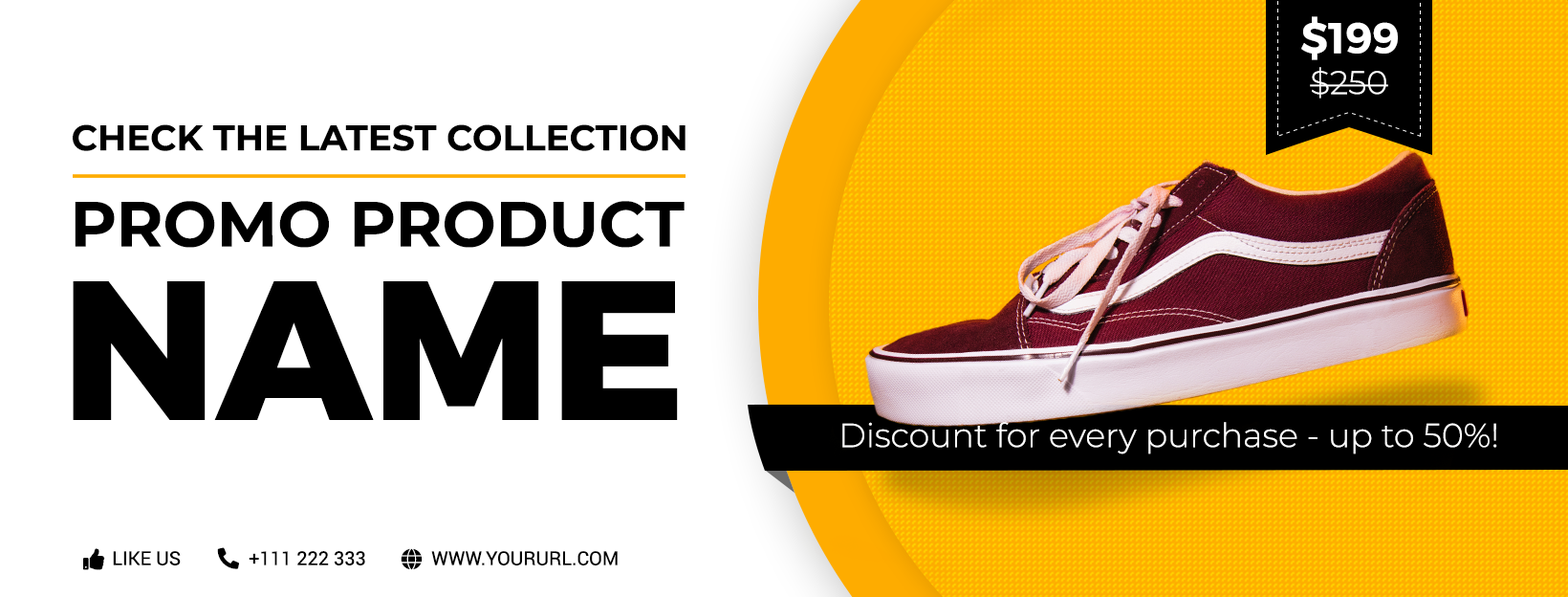
<style>
.page{position:relative;width:1568px;height:597px;background:#ffffff}
.page>*{position:absolute;margin:0}
.t1{font:43px "Montserrat-SemiBold";color:#ffffff}
.t2{font:32.5px "Montserrat-Light";color:#ffffff}
.t3{font:35.7px "Montserrat-Bold";color:#000000;text-transform:uppercase}
.t4{font:63.7px "Montserrat-Bold";color:#000000;text-transform:uppercase}
.t5{font:197.6px "Montserrat-ExtraBold";color:#000000;text-transform:uppercase}
.t6{font:33.3px "Montserrat-Light";color:#ffffff}
.t7{font:19.1px "Roboto-Regular";color:#000000;text-transform:uppercase}
</style>
<div class="page">
<p class="t1" style="left:1301px;top:16px;width:97px;height:44px">$199</p>
<p class="t2" style="left:1310px;top:67px;width:78px;height:31px">$250</p>
<p class="t3" style="left:73px;top:124px;width:613px;height:27px">Check the latest collection</p>
<p class="t4" style="left:75px;top:201px;width:610px;height:47px">promo product</p>
<p class="t5" style="left:73px;top:281px;width:605px;height:139px">Name</p>
<p class="t6" style="left:842px;top:422px;width:655px;height:32px">Discount for every purchase - up to 50%!</p>
<p class="t7" style="left:113px;top:551px;width:68px;height:14px">Like US</p>
<p class="t7" style="left:249px;top:551px;width:116px;height:14px">+111 222 333</p>
<p class="t7" style="left:431px;top:551px;width:187px;height:14px">www.yoururl.com</p>
</div>
